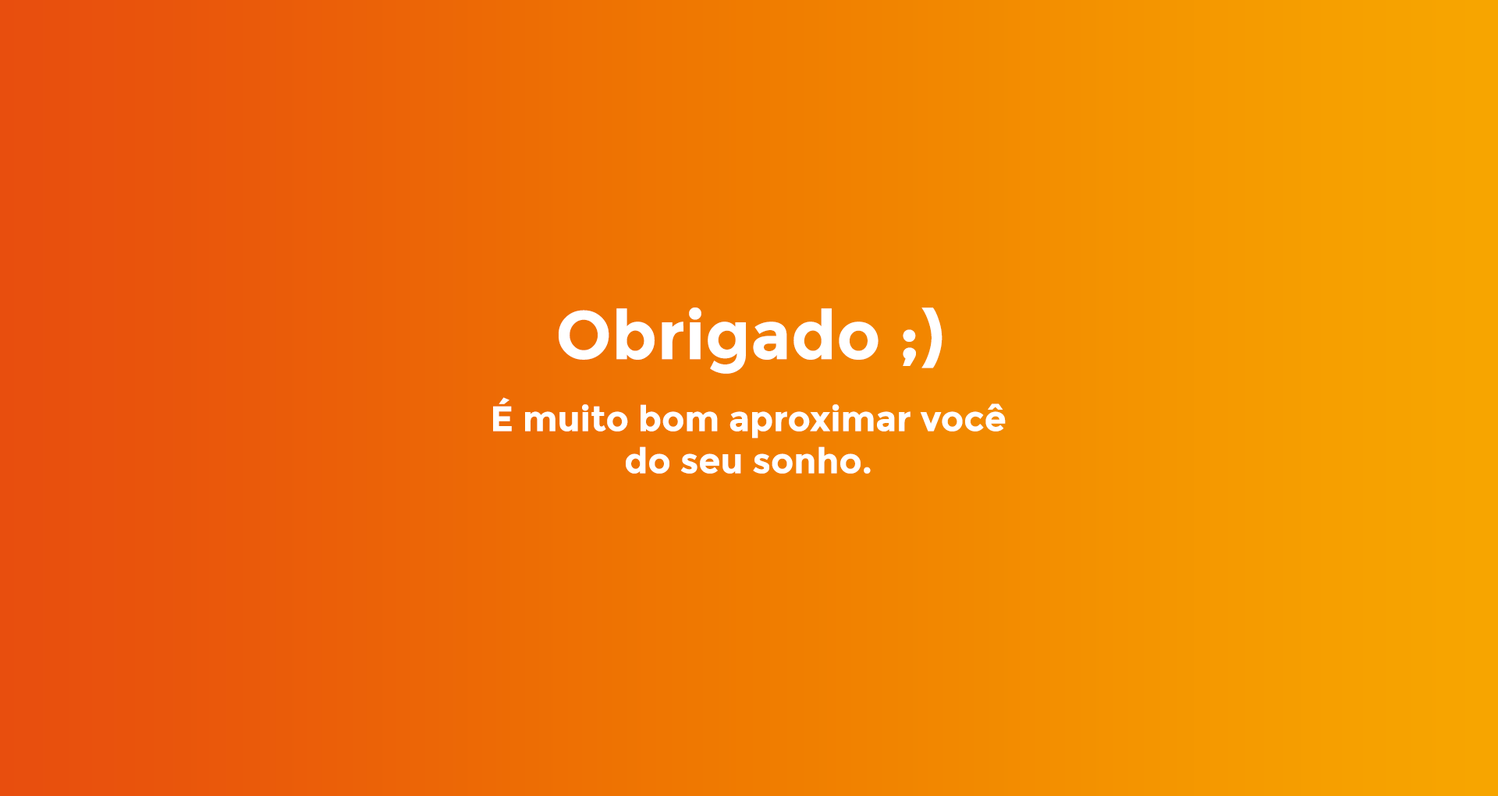
<style>
.page{position:relative;width:1498px;height:796px}
.page>*{position:absolute;margin:0}
.t1{font:68.1px "Montserrat-Bold";color:#ffffff}
.t2{font:35.1px/42.2px "Montserrat-Bold";color:#ffffff}
</style>
<div class="page">
<p class="t1" style="left:559px;top:307px;width:384px;height:67px">Obrigado ;)</p>
<p class="t2" style="left:493px;top:397px;width:513px;height:77px;text-align:center">É muito bom aproximar você<br>do seu sonho.</p>
</div>
